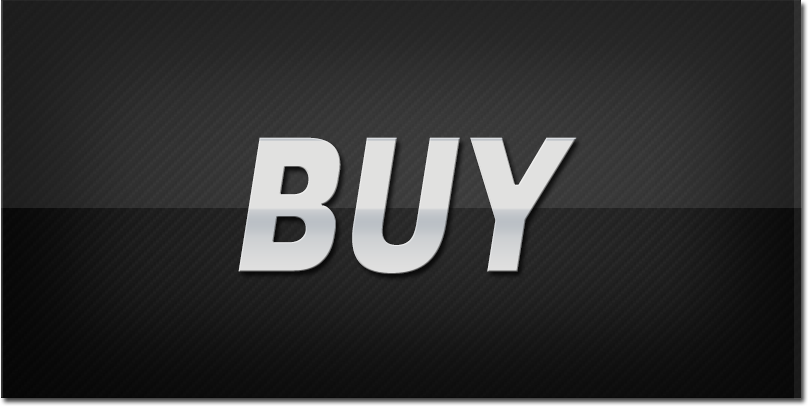
<style>
.page{position:relative;width:808px;height:406px}
.page>*{position:absolute;margin:0}
.t1{font:185.2px "FugazOne-Regular";color:#dfdfdf;scale:0.89 1}
</style>
<div class="page">
<p class="t1" style="left:238px;top:137px;width:339px;height:137px">BUY</p>
</div>
